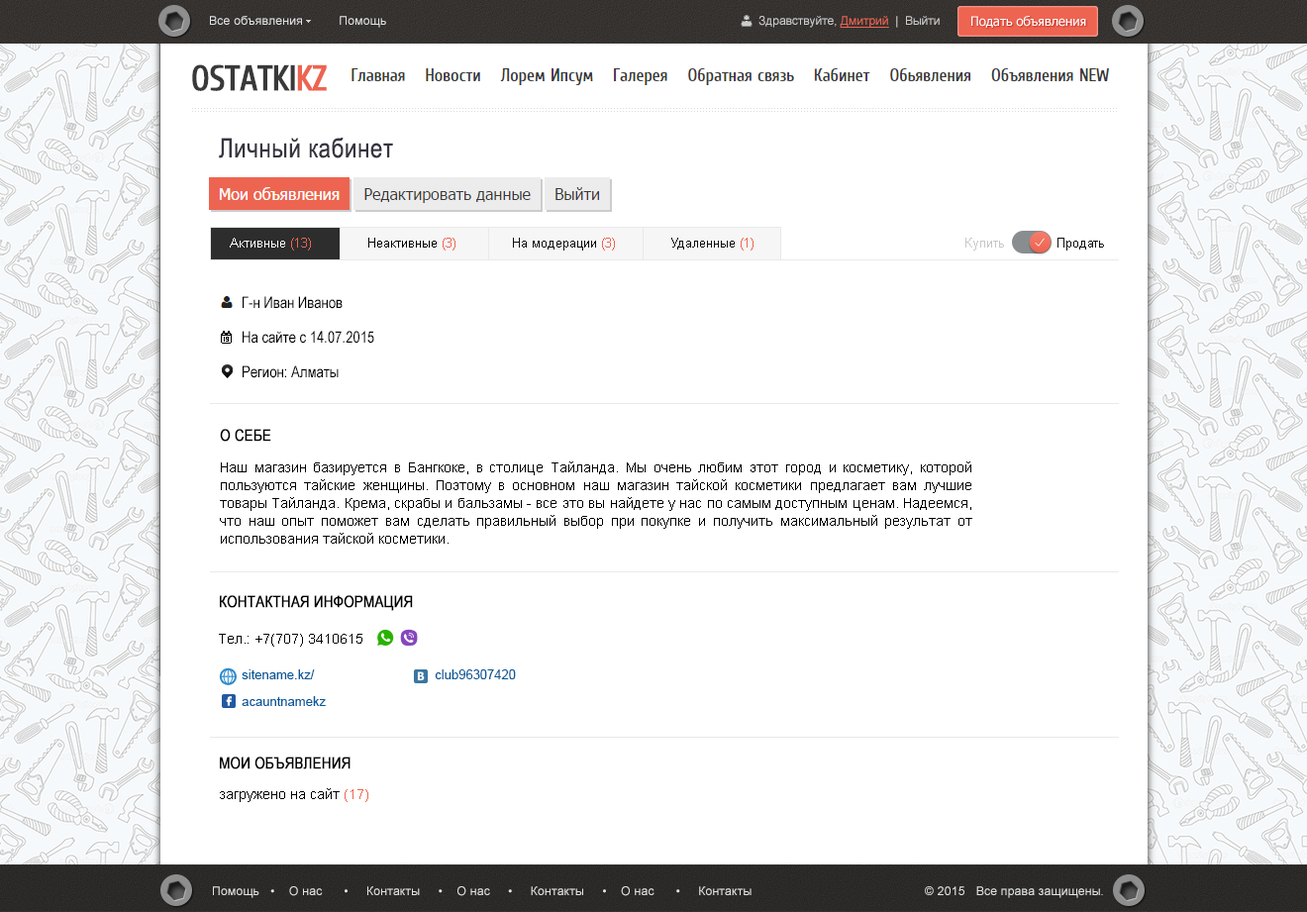
<style>
.page{position:relative;width:1307px;height:912px;background:#ffffff}
.page>*{position:absolute;margin:0}
.t1{font:11.9px "ArialMT";letter-spacing:0.025em;color:#e4e4e4}
.t2{font:11.9px "ArialMT";color:#cccccc}
.t3{font:11.9px "ArialMT";color:#ed6451;text-decoration:underline}
.t4{font:12.9px "Tahoma";color:#ffffff}
.t5{font:26.7px "ArialNarrow";letter-spacing:0.025em;color:#363540}
.t6{font:12.9px "ArialMT";color:#ffffff}
.t7{font:12.9px "ArialMT";color:#ed6451}
.t8{font:12.9px "ArialMT";color:#000000}
.t9{font:12.9px "ArialMT";color:#0e0e0e}
.t10{font:12.9px "ArialMT";color:#c7c7c7}
.t11{font:15.8px/34.7px "ArialNarrow";color:#000000}
.t12{font:15.8px "ArialNarrow";color:#000000;text-transform:uppercase;font-weight:bold}
.t13{font:13.9px/17.8px "ArialMT";color:#000000}
.t14{font:13.9px "ArialMT";color:#000000}
.t15{font:12.9px "ArialMT";color:#035a9a}
.t16{font:13.9px "ArialMT";color:#ed6451}
</style>
<div class="page">
<p class="t1" style="left:210px;top:16px;width:176px;height:12px">Все объявления          Помощь</p>
<p class="t2" style="left:759px;top:16px;width:181px;height:12px">Здравствуйте, <span class="t3">Дмитрий  </span>|  Выйти</p>
<p class="t4" style="left:972px;top:16px;width:114px;height:12px">Подать объявления</p>
<p class="t5" style="left:219px;top:138px;width:174px;height:20px">Личный кабинет</p>
<p class="t6" style="left:230px;top:238px;width:81px;height:13px">Активные <span class="t7">(13)</span></p>
<p class="t8" style="left:368px;top:238px;width:88px;height:13px">Неактивные <span class="t7">(3)</span></p>
<p class="t9" style="left:513px;top:238px;width:102px;height:13px">На модерации <span class="t7">(3)</span></p>
<p class="t9" style="left:671px;top:238px;width:83px;height:13px">Удаленные <span class="t7">(1)</span></p>
<p class="t9" style="left:966px;top:238px;width:138px;height:13px"><span class="t10">Купить </span>            Продать</p>
<p class="t11" style="left:243px;top:296px;width:131px;height:82px">Г-н Иван Иванов<br>На сайте с 14.07.2015<br>Регион: Алматы</p>
<p class="t12" style="left:220px;top:429px;width:51px;height:13px">О себе</p>
<p class="t13" style="left:220px;top:462px;width:753px;height:82px;text-align:justify">Наш магазин базируется в Бангкоке, в столице Тайланда. Мы очень любим этот город и косметику, которой пользуются тайские женщины. Поэтому в основном наш магазин тайской косметики предлагает вам лучшие товары Тайланда. Крема, скрабы и бальзамы - все это вы найдете у нас по самым доступным ценам. Надеемся, что наш опыт поможет вам сделать правильный выбор при покупке и получить максимальный результат от использования тайской косметики.</p>
<p class="t12" style="left:220px;top:595px;width:193px;height:16px">КОНТАКТНАЯ ИНФОРМАЦИЯ</p>
<p class="t14" style="left:219px;top:634px;width:143px;height:13px">Тел.: +7(707) 3410615</p>
<p class="t15" style="left:242px;top:669px;width:73px;height:10px">sitename.kz/</p>
<p class="t15" style="left:435px;top:669px;width:81px;height:10px">club96307420</p>
<p class="t15" style="left:242px;top:696px;width:84px;height:10px">acauntnamekz</p>
<p class="t12" style="left:220px;top:757px;width:131px;height:13px">мОИ ОБЪЯВЛЕНИЯ</p>
<p class="t14" style="left:220px;top:788px;width:148px;height:14px">загружено на сайт <span class="t16">(17)</span></p>
<p class="t1" style="left:213px;top:886px;width:539px;height:12px">Помощь   •    О нас      •     Контакты     •    О нас     •     Контакты     •    О нас      •     Контакты</p>
<p class="t1" style="left:925px;top:886px;width:178px;height:12px">© 2015   Все права защищены.</p>
</div>
